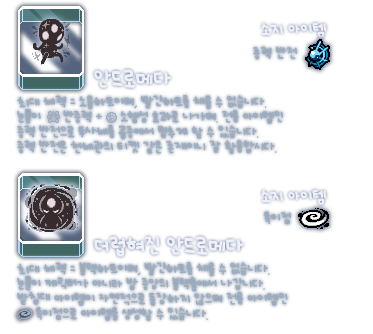
<style>
.page{position:relative;width:373px;height:334px;background:#ffffff}
.page>*{position:absolute;margin:0}
.t1{font:10px "UhBeeSe_hyunBold";color:#9badc1}
.t2{font:10px/15px "UhBeeSe_hyunBold";letter-spacing:-0.025em;color:#9badc1}
.t3{font:16px/23px "UhBeeSe_hyunBold";color:#edf1ff}
.t4{font:10px/15px "UhBeeSe_hyunBold";letter-spacing:-0.1em;color:#9badc1}
.t5{font:10px/15px "UhBeeSe_hyunBold";letter-spacing:-0.125em;color:#9badc1}
</style>
<div class="page">
<p class="t1" style="left:253px;top:46px;width:45px;height:14px">중력 반전</p>
<p class="t2" style="left:17px;top:69px;width:266px;height:85px"><span class="t3">            안드로메다<br></span>최대 체력 = 소울하트이며, <span class="t4">빨간하</span>트를 채울 수 없습니다. <br>눈물이      반중력 +     <span class="t5">소</span>행성 효과로 나가며. 전용 아이템인<br>중력 반전으로 투사체를 공중에서 멈추게 할 수 있습니다.<br>중력 반전은 천체관의 티켓 같은 존재이니 잘 활용합시다.</p>
<p class="t1" style="left:264px;top:211px;width:27px;height:14px">특이점</p>
<p class="t2" style="left:17px;top:236px;width:271px;height:85px"><span class="t3">            더럽혀진 안드로메다<br></span>최대 체력 = 블랙하트이며, <span class="t4">빨간하</span>트를 채울 수 없습니다. <br>눈물이 캐릭터가 아니라 방 중앙의 블랙홀에서 나갑니다.  <br>받침대 아이템이 자연적으로 등장하지 않으며 전용 아이템인<br>     특이점으로 아이템을 생성할 수 있습니다.</p>
</div>
